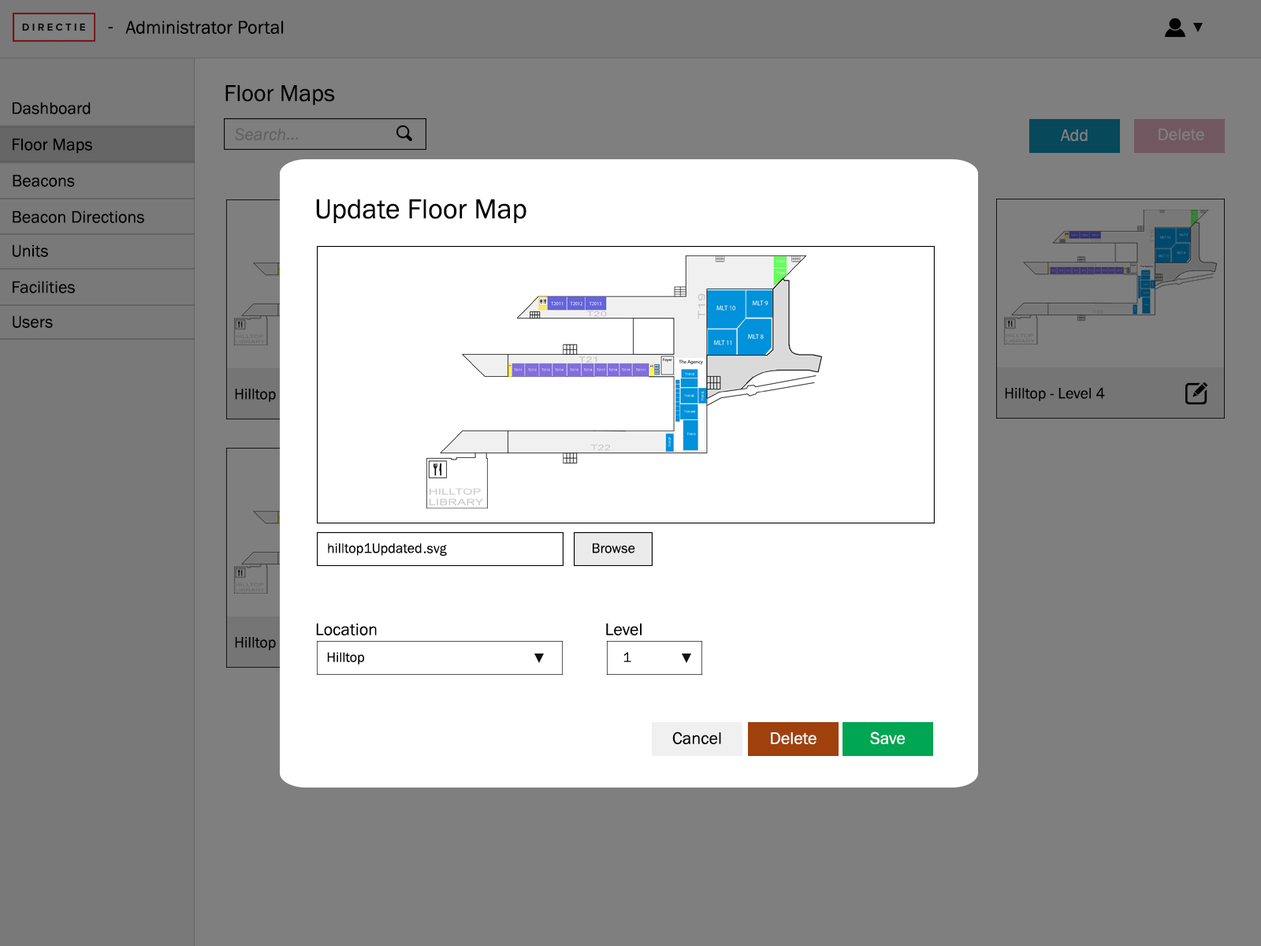
<style>
.page{position:relative;width:1261px;height:946px;background:#7f7f7f}
.page>*{position:absolute;margin:0}
.t1{font:18.9px "FranklinGothic-Book";color:#000000}
.t2{font:23.6px "FranklinGothic-Book";color:#000000}
.t3{font:17.3px "FranklinGothic-Book";color:#000000}
.t4{font:17.3px "FranklinGothic-Book";color:#7f7f7f}
.t5{font:28.4px "FranklinGothic-Book";color:#000000}
.t6{font:14.2px "FranklinGothic-Book";color:#000000}
.t7{font:17.3px "FranklinGothic-Book";color:#010101}
.t8{font:17.3px "FranklinGothic-Book";color:#fefefe}
</style>
<div class="page">
<p class="t1" style="left:108px;top:27px;width:5px;height:1px">-</p>
<p class="t1" style="left:125px;top:20px;width:159px;height:14px">Administrator Portal</p>
<p class="t2" style="left:225px;top:85px;width:110px;height:21px">Floor Maps</p>
<p class="t3" style="left:13px;top:102px;width:78px;height:12px">Dashboard</p>
<p class="t3" style="left:13px;top:138px;width:79px;height:16px">Floor Maps</p>
<p class="t4" style="left:1060px;top:129px;width:28px;height:12px">Add</p>
<p class="t4" style="left:1158px;top:128px;width:46px;height:12px">Delete</p>
<p class="t3" style="left:13px;top:174px;width:62px;height:13px">Beacons</p>
<p class="t5" style="left:316px;top:199px;width:210px;height:24px">Update Floor Map</p>
<p class="t3" style="left:13px;top:210px;width:131px;height:13px">Beacon Directions</p>
<p class="t3" style="left:13px;top:244px;width:35px;height:13px">Units</p>
<p class="t3" style="left:13px;top:281px;width:62px;height:12px">Facilities</p>
<p class="t3" style="left:13px;top:315px;width:40px;height:13px">Users</p>
<p class="t6" style="left:328px;top:543px;width:94px;height:13px">hilltop1Updated</p>
<p class="t6" style="left:424px;top:545px;width:23px;height:11px">svg.</p>
<p class="t6" style="left:593px;top:543px;width:42px;height:10px">Browse</p>
<p class="t3" style="left:316px;top:623px;width:61px;height:12px">Location</p>
<p class="t3" style="left:606px;top:623px;width:35px;height:12px">Level</p>
<p class="t6" style="left:327px;top:652px;width:37px;height:12px">Hilltop</p>
<p class="t6" style="left:623px;top:652px;width:8px;height:10px">1</p>
<p class="t7" style="left:672px;top:731px;width:49px;height:13px">Cancel</p>
<p class="t8" style="left:771px;top:732px;width:45px;height:12px">Delete</p>
<p class="t8" style="left:870px;top:731px;width:35px;height:13px">Save</p>
</div>
